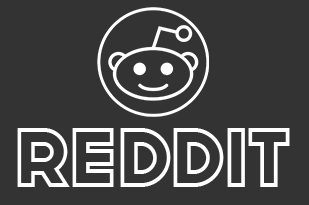
<style>
.page{position:relative;width:309px;height:205px;background:#333333}
.page>*{position:absolute;margin:0}
.t1{font:85px "Avalon-Regular";color:#ffffff}
</style>
<div class="page">
<p class="t1" style="left:17px;top:128px;width:273px;height:59px">reddit</p>
</div>
